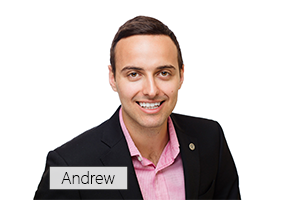
<style>
.page{position:relative;width:300px;height:200px;background:#ffffff}
.page>*{position:absolute;margin:0}
.t1{font:16.7px "SegoeUI-Light";color:#000000}
</style>
<div class="page">
<p class="t1" style="left:61px;top:171px;width:54px;height:13px">Andrew</p>
</div>
